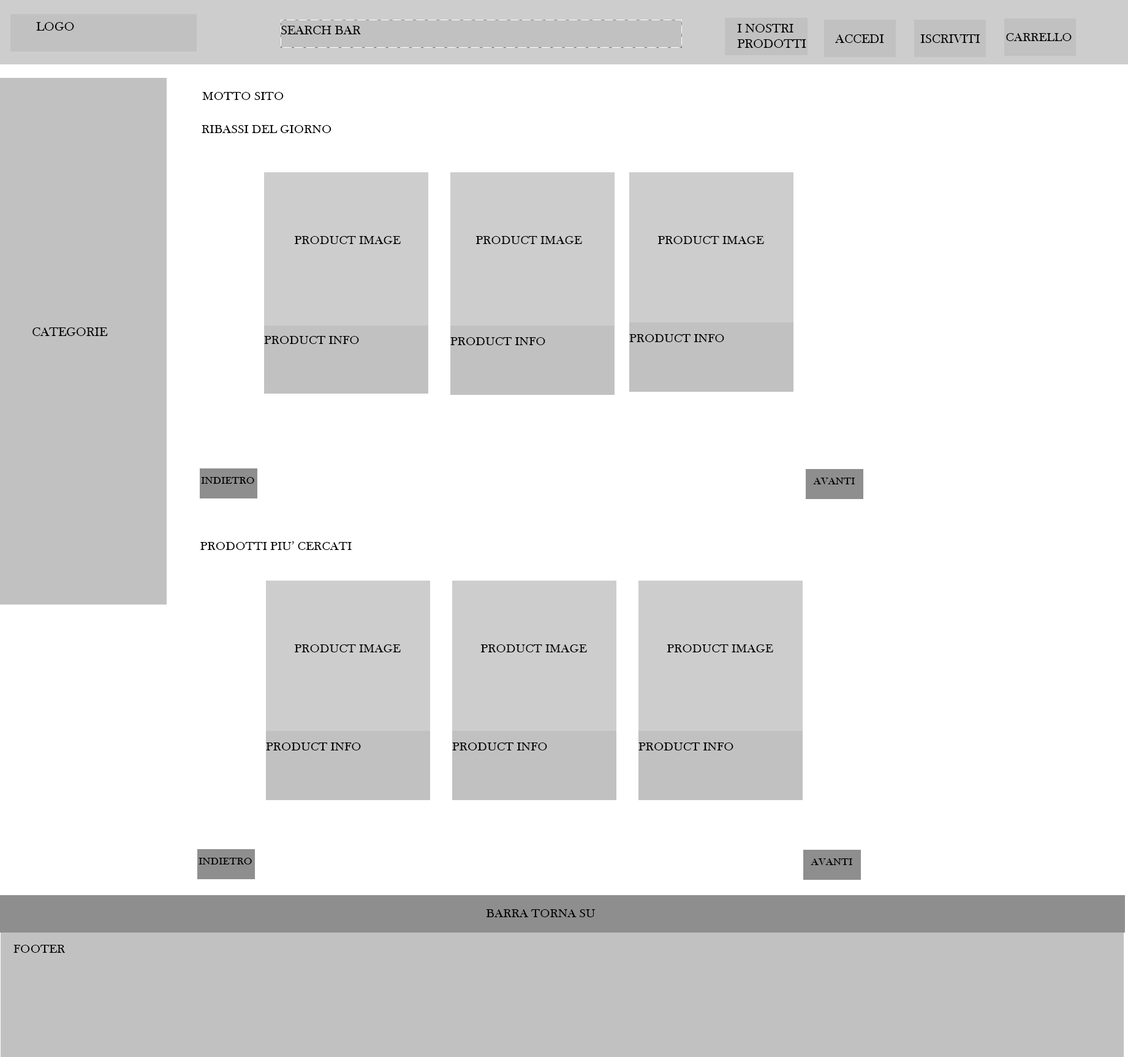
<style>
.page{position:relative;width:1128px;height:1057px;background:#ffffff}
.page>*{position:absolute;margin:0}
.t1{font:22.1px "BaskOldFace";color:#000000}
.t2{font:22.1px/15.3px "BaskOldFace";color:#000000}
.t3{font:21.5px "BaskOldFace";color:#000000}
.t4{font:18.4px "BaskOldFace";color:#000000}
</style>
<div class="page">
<p class="t1" style="left:36px;top:22px;width:38px;height:9px">LOGO</p>
<p class="t1" style="left:281px;top:26px;width:80px;height:8px">SEARCH BAR</p>
<p class="t2" style="left:737px;top:24px;width:70px;height:24px">I NOSTRI<br>PRODOTTI</p>
<p class="t1" style="left:835px;top:34px;width:49px;height:9px">ACCEDI</p>
<p class="t1" style="left:921px;top:34px;width:60px;height:9px">ISCRIVITI</p>
<p class="t3" style="left:1006px;top:33px;width:66px;height:8px">CARRELLO</p>
<p class="t3" style="left:202px;top:92px;width:82px;height:8px">MOTTO SITO</p>
<p class="t3" style="left:202px;top:125px;width:130px;height:8px">RIBASSI DEL GIORNO</p>
<p class="t3" style="left:294px;top:236px;width:107px;height:8px">PRODUCT IMAGE</p>
<p class="t3" style="left:476px;top:236px;width:106px;height:8px">PRODUCT IMAGE</p>
<p class="t3" style="left:658px;top:236px;width:106px;height:8px">PRODUCT IMAGE</p>
<p class="t1" style="left:32px;top:327px;width:76px;height:9px">CATEGORIE</p>
<p class="t3" style="left:264px;top:336px;width:95px;height:8px">PRODUCT INFO</p>
<p class="t3" style="left:451px;top:337px;width:95px;height:8px">PRODUCT INFO</p>
<p class="t3" style="left:629px;top:334px;width:96px;height:8px">PRODUCT INFO</p>
<p class="t4" style="left:201px;top:477px;width:53px;height:7px">INDIETRO</p>
<p class="t4" style="left:813px;top:477px;width:42px;height:7px">AVANTI</p>
<p class="t3" style="left:200px;top:541px;width:152px;height:9px">PRODOTTI PIU’ CERCATI</p>
<p class="t3" style="left:294px;top:644px;width:107px;height:8px">PRODUCT IMAGE</p>
<p class="t3" style="left:481px;top:644px;width:106px;height:8px">PRODUCT IMAGE</p>
<p class="t3" style="left:667px;top:644px;width:107px;height:8px">PRODUCT IMAGE</p>
<p class="t3" style="left:266px;top:742px;width:95px;height:8px">PRODUCT INFO</p>
<p class="t3" style="left:452px;top:742px;width:95px;height:8px">PRODUCT INFO</p>
<p class="t3" style="left:639px;top:742px;width:95px;height:8px">PRODUCT INFO</p>
<p class="t4" style="left:199px;top:858px;width:53px;height:6px">INDIETRO</p>
<p class="t4" style="left:811px;top:858px;width:42px;height:7px">AVANTI</p>
<p class="t3" style="left:486px;top:909px;width:110px;height:8px">BARRA TORNA SU</p>
<p class="t3" style="left:13px;top:945px;width:52px;height:8px">FOOTER</p>
</div>
